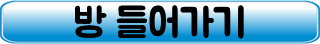
<style>
.page{position:relative;width:320px;height:44px}
.page>*{position:absolute;margin:0}
.t1{font:40px "BMJUA";color:#000000}
</style>
<div class="page">
<p class="t1" style="left:75px;top:5px;width:169px;height:34px">방 들어가기</p>
</div>
